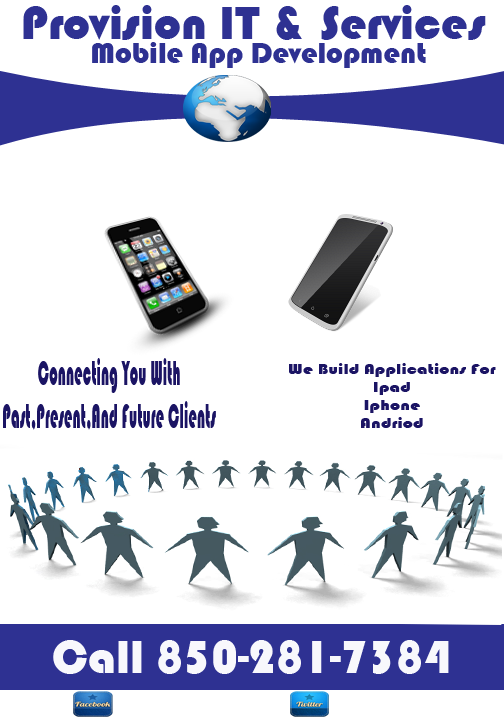
<style>
.page{position:relative;width:504px;height:720px;background:#ffffff}
.page>*{position:absolute;margin:0}
.t1{font:48px "Bauhaus93";color:#2e3192}
.t2{font:30px "Bauhaus93";color:#2e3192}
.t3{font:36px "Bauhaus93";color:#1b1464;scale:0.43 1}
.t4{font:15.2px "Bauhaus93";color:#1b1464;scale:1.21 1}
.t5{font:48px "Bauhaus93";color:#f8f8fc}
</style>
<div class="page">
<p class="t1" style="left:23px;top:5px;width:463px;height:35px">Provision IT &amp; Services</p>
<p class="t2" style="left:92px;top:42px;width:334px;height:26px">Mobile App Development</p>
<p class="t3" style="left:3px;top:358px;width:213px;height:72px;text-align:center">Connecting You With<br>Past,Present,And Future Clients</p>
<p class="t4" style="left:289px;top:363px;width:207px;height:65px;text-align:center">We Build Applications For<br>Ipad<br>Iphone<br>Andriod</p>
<p class="t5" style="left:53px;top:640px;width:396px;height:34px">Call 850-281-7384</p>
</div>
